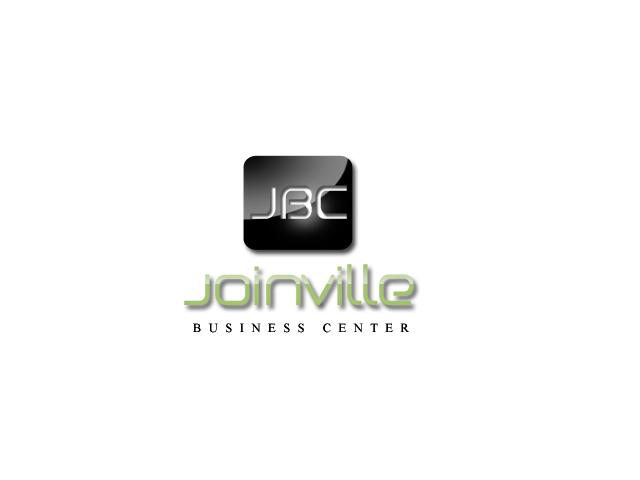
<style>
.page{position:relative;width:640px;height:480px;background:#ffffff}
.page>*{position:absolute;margin:0}
.t1{font:56px "Birdman";font-weight:bold;scale:0.88 1}
.t2{font:52px "Birdman";color:#adce75}
.t3{font:12.5px "TimesNewRomanPSMT";letter-spacing:0.6em;color:#000000}
</style>
<div class="page">
<p class="t1" style="left:250px;top:185px;width:97px;height:34px">JBC</p>
<p class="t2" style="left:184px;top:264px;width:230px;height:41px">Joinville</p>
<p class="t3" style="left:193px;top:323px;width:216px;height:10px">BUSINESS CENTER</p>
</div>
